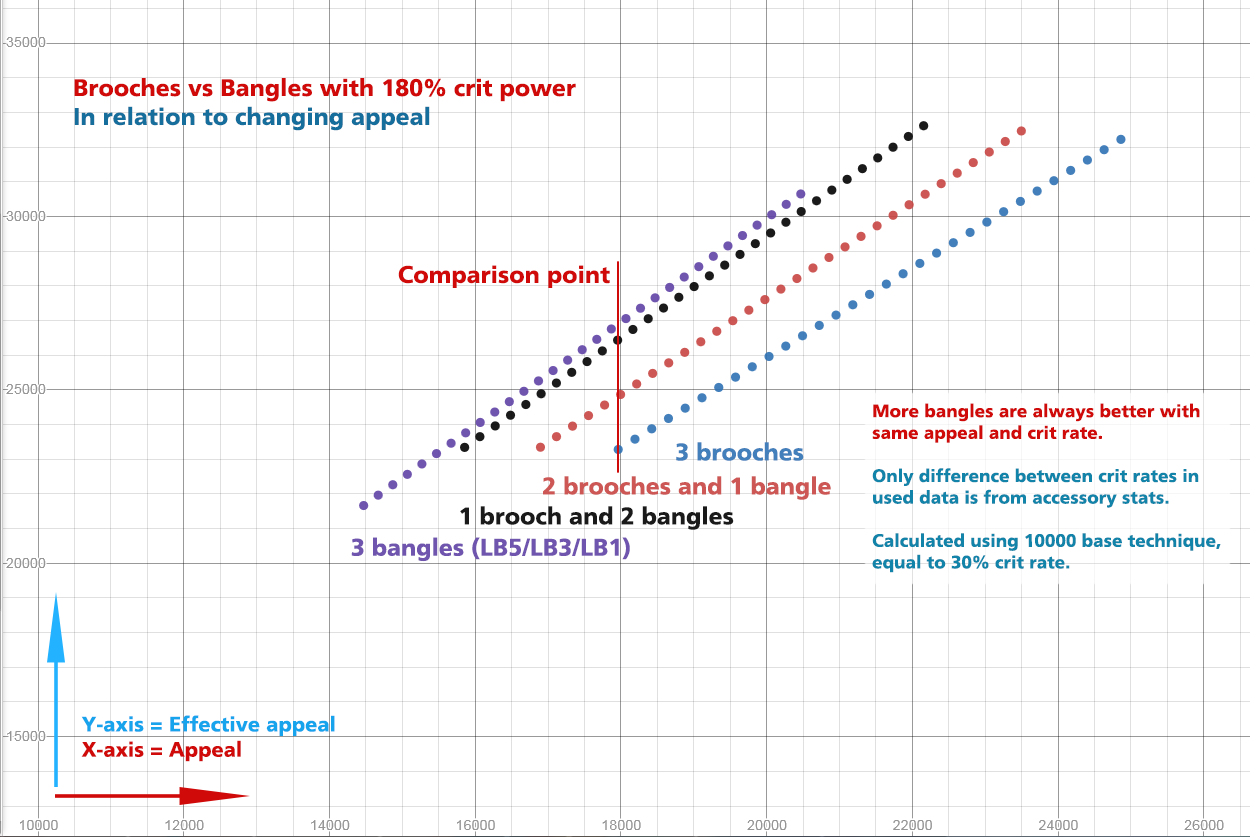
<style>
.page{position:relative;width:1250px;height:837px;background:#ffffff}
.page>*{position:absolute;margin:0}
.t1{font:24px "DorisPFC-Bold";color:#d00909}
.t2{font:24px "DorisPFC-Bold";color:#156e9c}
.t3{font:18px "DorisPFC-Bold";color:#1284a9}
.t4{font:18px "DorisPFC-Bold";color:#d00909}
.t5{font:24px "DorisPFC-Bold";color:#427fbb}
.t6{font:24px "DorisPFC-Bold";color:#cd5754}
.t7{font:24px "DorisPFC-Bold";color:#1a1a1a}
.t8{font:24px "DorisPFC-Bold";color:#7055af}
.t9{font:21px "DorisPFC-Bold";color:#18a3ed}
.t10{font:21px "DorisPFC-Bold";color:#d00909}
</style>
<div class="page">
<p class="t1" style="left:74px;top:78px;width:502px;height:53px">Brooches vs Bangles with 180% crit power<br><span class="t2">In relation to changing appeal</span></p>
<p class="t1" style="left:398px;top:265px;width:212px;height:23px">Comparison point</p>
<p class="t3" style="left:872px;top:403px;width:349px;height:170px"><span class="t4">More bangles are always better with same appeal and crit rate.<br></span><br>Only difference between crit rates in used data is from accessory stats.<br><br>Calculated using 10000 base technique,<br>equal to 30% crit rate.</p>
<p class="t5" style="left:676px;top:442px;width:128px;height:19px">3 brooches</p>
<p class="t6" style="left:543px;top:476px;width:288px;height:24px">2 brooches and 1 bangle</p>
<p class="t7" style="left:460px;top:506px;width:274px;height:24px">1 brooch and 2 bangles</p>
<p class="t8" style="left:351px;top:537px;width:279px;height:25px">3 bangles (LB5/LB3/LB1)</p>
<p class="t9" style="left:81px;top:715px;width:254px;height:47px">Y-axis = Effective appeal<br><span class="t10">X-axis = Appeal</span></p>
</div>
